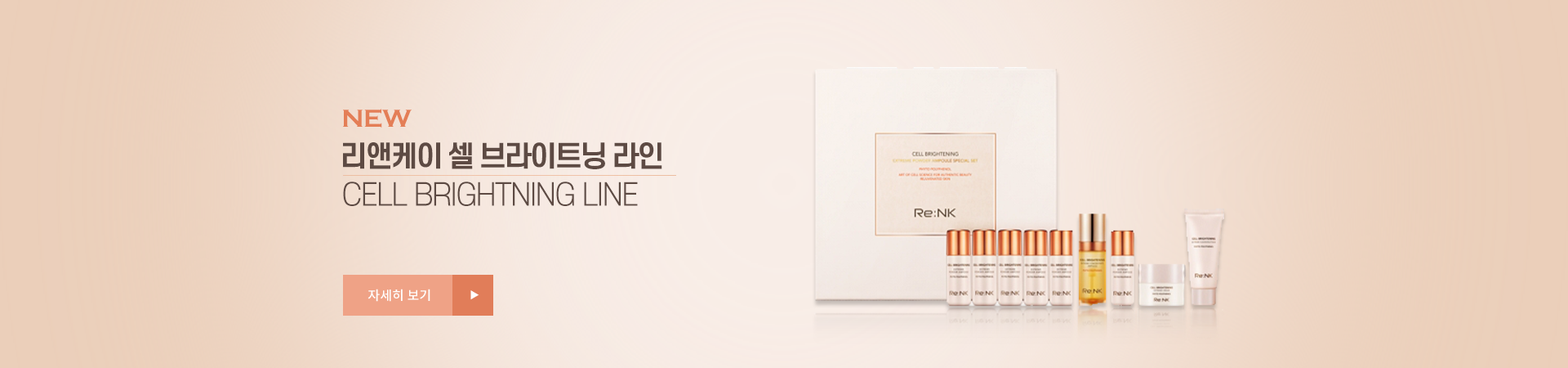
<style>
.page{position:relative;width:1568px;height:368px}
.page>*{position:absolute;margin:0}
.t1{font:25.4px "CopperplateGothic-Bold";letter-spacing:-0.01em;color:#e47e56}
.t2{font:28.6px "S-CoreDream-6Bold";letter-spacing:-0.075em;color:#5d4a43}
.t3{font:30.2px "S-CoreDream-3Light";letter-spacing:-0.05em;color:#5d4a43}
.t4{font:13.1px "NotoSansCJKkr-Medium";color:#ffffff}
.t5{font:9.8px "NotoSansCJKkr-Medium";color:#ffffff}
</style>
<div class="page">
<p class="t1" style="left:343px;top:109px;width:69px;height:18px">NEW</p>
<p class="t2" style="left:343px;top:142px;width:319px;height:27px">리앤케이 셀 브라이트닝 라인</p>
<p class="t3" style="left:343px;top:181px;width:295px;height:25px">CELL BRIGHTNING LINE</p>
<p class="t4" style="left:368px;top:288px;width:62px;height:13px">자세히 보기</p>
<p class="t5" style="left:470px;top:290px;width:9px;height:10px">▶</p>
</div>
